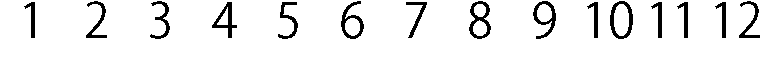
<style>
.page{position:relative;width:768px;height:64px;background:#ffffff}
.page>*{position:absolute;margin:0}
.t1{font:48px "KozGoPr6N-Regular";color:#000000}
</style>
<div class="page">
<p class="t1" style="left:24px;top:2px;width:11px;height:36px">1</p>
<p class="t1" style="left:86px;top:1px;width:21px;height:37px">2</p>
<p class="t1" style="left:150px;top:1px;width:20px;height:38px">3</p>
<p class="t1" style="left:212px;top:2px;width:25px;height:36px">4</p>
<p class="t1" style="left:278px;top:2px;width:20px;height:37px">5</p>
<p class="t1" style="left:341px;top:1px;width:23px;height:38px">6</p>
<p class="t1" style="left:406px;top:2px;width:21px;height:36px">7</p>
<p class="t1" style="left:469px;top:1px;width:22px;height:38px">8</p>
<p class="t1" style="left:533px;top:1px;width:23px;height:38px">9</p>
<p class="t1" style="left:587px;top:1px;width:46px;height:38px">10</p>
<p class="t1" style="left:651px;top:2px;width:37px;height:36px">11</p>
<p class="t1" style="left:715px;top:1px;width:45px;height:37px">12</p>
</div>
